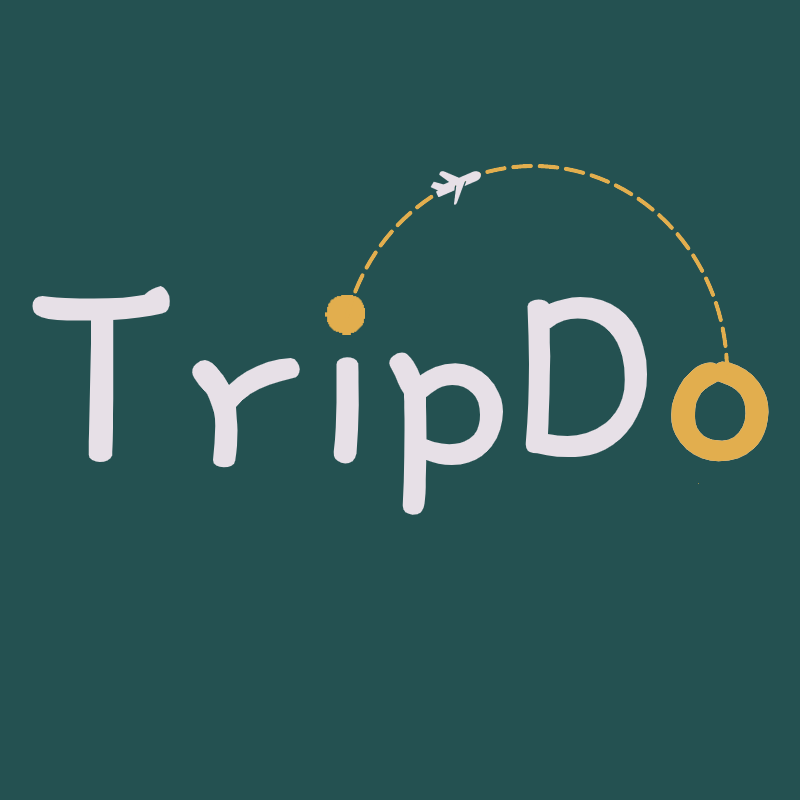
<style>
.page{position:relative;width:800px;height:800px;background:#245151}
.page>*{position:absolute;margin:0}
.t1{font:300px "GamjaFlower-Regular";color:#e7e0e7}
.t2{font:300px "GamjaFlower-Regular";color:#e2ae4e}
</style>
<div class="page">
<p class="t1" style="left:32px;top:285px;width:737px;height:230px">TripDo</p>
<p class="t2" style="left:671px;top:361px;width:98px;height:101px">o</p>
</div>
